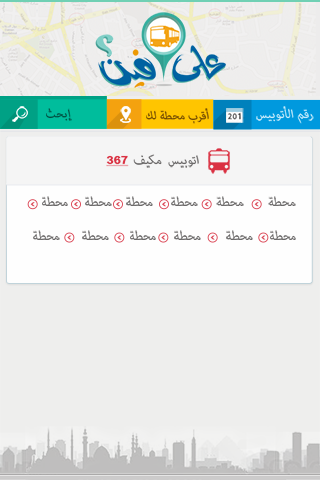
<style>
.page{position:relative;width:320px;height:480px;background:#eeeeed}
.page>*{position:absolute;margin:0}
.t1{font:16px "Arial-BlackItalic";letter-spacing:0.025em;color:#014f41}
.t2{font:16px "Arial-BlackItalic";color:#714a03}
.t3{font:17.2px "Arial-BlackItalic";color:#bde8fb}
.t4{font:17.2px "Arial-BlackItalic";color:#6b6969}
.t5{font:10.8px "ArialMT-Black";color:#da3142;text-decoration:underline}
</style>
<div class="page">
<p class="t1" style="left:46px;top:108px;width:26px;height:13px">إبحث</p>
<p class="t1" style="left:46px;top:108px;width:26px;height:13px">إبحث</p>
<p class="t2" style="left:146px;top:108px;width:63px;height:16px">أقرب محطة لك</p>
<p class="t3" style="left:256px;top:106px;width:58px;height:18px">رقم الأتوبيس</p>
<p class="t4" style="left:106px;top:154px;width:93px;height:14px">اتوبيس مكيف <span class="t5">367</span></p>
<p class="t4" style="left:42px;top:196px;width:26px;height:10px">محطة</p>
<p class="t4" style="left:85px;top:196px;width:27px;height:10px">محطة</p>
<p class="t4" style="left:126px;top:196px;width:27px;height:10px">محطة</p>
<p class="t4" style="left:171px;top:196px;width:27px;height:10px">محطة</p>
<p class="t4" style="left:216px;top:196px;width:28px;height:10px">محطة</p>
<p class="t4" style="left:268px;top:196px;width:28px;height:10px">محطة</p>
<p class="t4" style="left:33px;top:230px;width:27px;height:10px">محطة</p>
<p class="t4" style="left:82px;top:230px;width:27px;height:10px">محطة</p>
<p class="t4" style="left:130px;top:230px;width:26px;height:10px">محطة</p>
<p class="t4" style="left:174px;top:230px;width:27px;height:10px">محطة</p>
<p class="t4" style="left:226px;top:230px;width:27px;height:10px">محطة</p>
<p class="t4" style="left:270px;top:230px;width:26px;height:10px">محطة</p>
</div>
